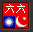
<style>
.page{position:relative;width:33px;height:32px;background:#f20000}
.page>*{position:absolute;margin:0}
.t1{font:10.4px "SimSun";color:#ffffff}
</style>
<div class="page">
<p class="t1" style="left:5px;top:4px;width:20px;height:9px">六六</p>
</div>
